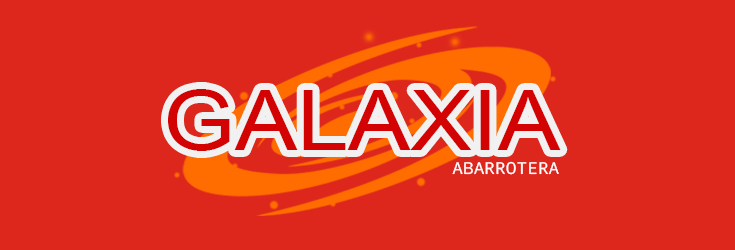
<style>
.page{position:relative;width:735px;height:250px;background:#dd271d}
.page>*{position:absolute;margin:0}
.t1{font:83.4px "ArialMT";color:#d40303;scale:1.11 1}
.t2{font:16.4px "NotoMono";color:#ffffff;scale:1.09 1}
</style>
<div class="page">
<p class="t1" style="left:168px;top:89px;width:393px;height:62px">GALAXIA</p>
<p class="t2" style="left:452px;top:161px;width:107px;height:14px">ABARROTERA</p>
</div>
